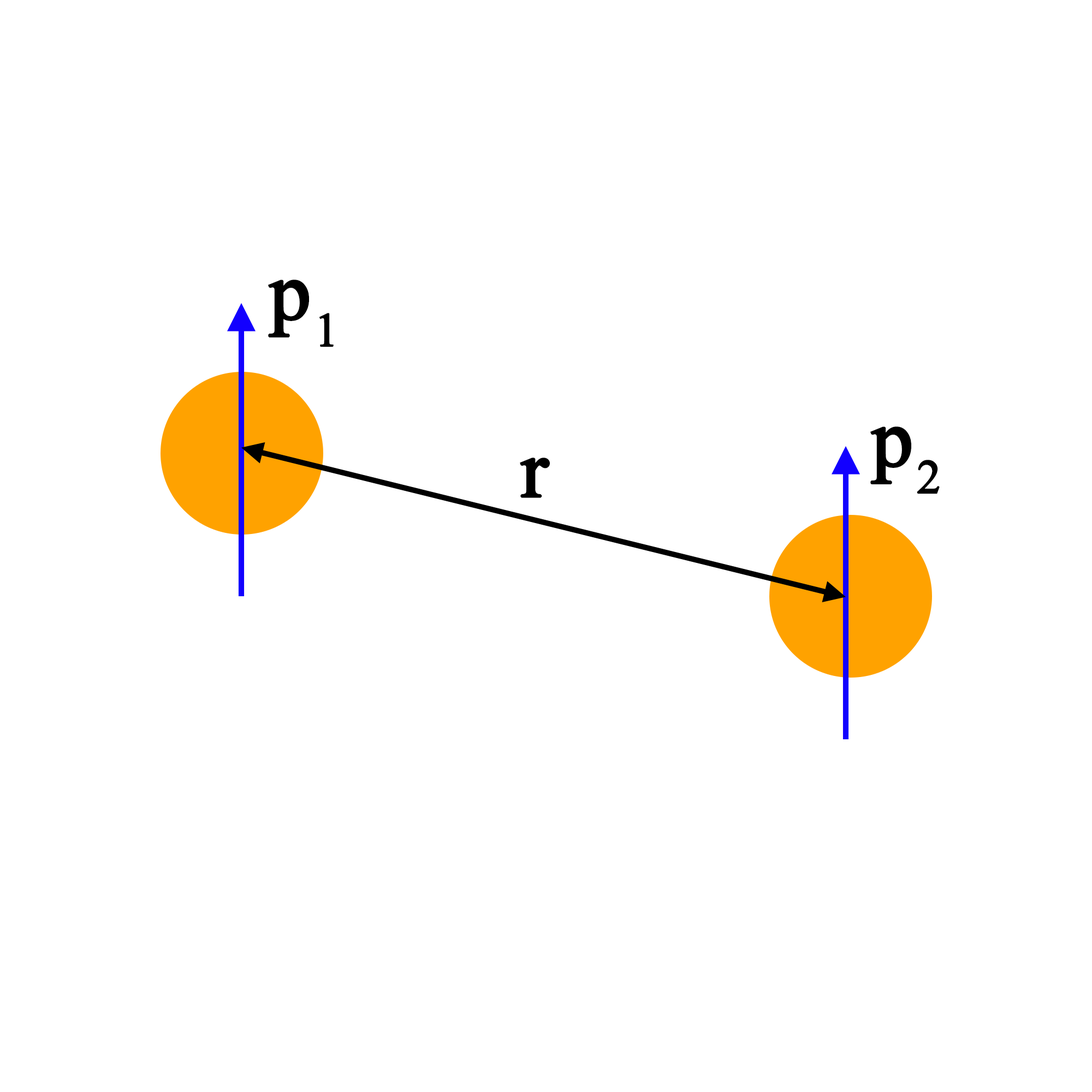
<style>
.page{position:relative;width:1092px;height:1092px;background:#ffffff}
.page>*{position:absolute;margin:0}
.t1{font:82.2px "TimesNewRomanPSMT";letter-spacing:0.02em;color:#000000;font-weight:bold}
</style>
<div class="page">
<p class="t1" style="left:268px;top:280px;width:66px;height:67px">p1</p>
<p class="t1" style="left:870px;top:426px;width:70px;height:68px">p2</p>
<p class="t1" style="left:520px;top:458px;width:30px;height:40px">r</p>
</div>
